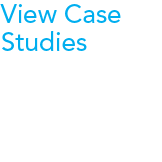
<style>
.page{position:relative;width:162px;height:162px;background:#ffffff}
.page>*{position:absolute;margin:0}
.t1{font:26px/28px "AvenirLTStd-Roman";color:#00aeef}
</style>
<div class="page">
<p class="t1" style="left:0px;top:4px;width:121px;height:47px">View Case<br>Studies</p>
</div>
